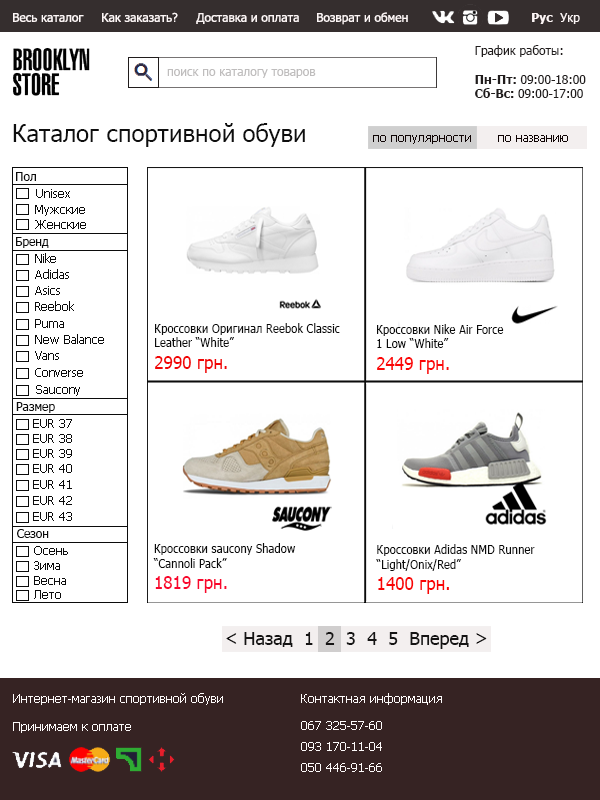
<style>
.page{position:relative;width:600px;height:800px;background:#ffffff}
.page>*{position:absolute;margin:0}
.t1{font:12px "Tahoma";color:#fdf6f6}
.t2{font:12px "Tahoma-Bold";color:#fdf6f6}
.t3{font:12px "Tahoma";color:#201c1c}
.t4{font:12px "Tahoma-Bold";color:#201c1c}
.t5{font:12px "Tahoma";color:#bfbdbd}
.t6{font:24px "Tahoma";color:#0e0e0e}
.t7{font:12px "Tahoma";color:#0e0303}
.t8{font:12px "Tahoma";color:#0b0b0b}
.t9{font:12px "Tahoma";color:#0b0b0b;scale:0.95 1}
.t10{font:18px "Tahoma";color:#f10505;scale:0.95 1}
.t11{font:18px "Tahoma";color:#fb0707;scale:0.95 1}
.t12{font:18px "Tahoma";color:#f9062e;scale:0.95 1}
.t13{font:18px "Tahoma";color:#f90505;scale:0.95 1}
.t14{font:18px "Tahoma";color:#151414}
.t15{font:18px "Tahoma";color:#f10505}
.t16{font:12px "Tahoma";color:#fefbfb}
</style>
<div class="page">
<p class="t1" style="left:13px;top:13px;width:71px;height:9px">Весь каталог</p>
<p class="t1" style="left:102px;top:12px;width:76px;height:10px">Как заказать?</p>
<p class="t1" style="left:196px;top:13px;width:103px;height:11px">Доставка и оплата</p>
<p class="t1" style="left:317px;top:12px;width:91px;height:13px">Возврат и обмен</p>
<p class="t2" style="left:532px;top:13px;width:21px;height:11px">Рус</p>
<p class="t1" style="left:560px;top:13px;width:20px;height:11px">Укр</p>
<p class="t3" style="left:475px;top:45px;width:111px;height:53px;text-align:right">График работы:<br><br><span class="t4">Пн-Пт:</span> 09:00-18:00<br><span class="t4">Сб-Вс: </span>09:00-17:00</p>
<p class="t5" style="left:167px;top:69px;width:149px;height:9px">поиск по каталогу товаров</p>
<p class="t6" style="left:13px;top:123px;width:292px;height:24px">Каталог спортивной обуви</p>
<p class="t7" style="left:373px;top:135px;width:98px;height:9px">по популярности</p>
<p class="t7" style="left:498px;top:135px;width:70px;height:7px">по названию</p>
<p class="t8" style="left:16px;top:172px;width:20px;height:9px">Пол</p>
<p class="t8" style="left:36px;top:189px;width:34px;height:9px">Unisex</p>
<p class="t8" style="left:35px;top:205px;width:50px;height:11px">Мужские</p>
<p class="t8" style="left:35px;top:220px;width:51px;height:9px">Женские</p>
<p class="t8" style="left:16px;top:237px;width:33px;height:11px">Бренд</p>
<p class="t8" style="left:35px;top:253px;width:21px;height:10px">Nike</p>
<p class="t8" style="left:35px;top:269px;width:34px;height:10px">Adidas</p>
<p class="t8" style="left:35px;top:286px;width:25px;height:9px">Asics</p>
<p class="t8" style="left:35px;top:301px;width:39px;height:10px">Reebok</p>
<p class="t8" style="left:35px;top:319px;width:29px;height:9px">Puma</p>
<p class="t9" style="left:155px;top:323px;width:185px;height:50px;text-align:right">Кроссовки Оригинал Reebok Classic Leather “White”<br><span class="t10">2990 грн.</span></p>
<p class="t9" style="left:377px;top:324px;width:127px;height:50px;text-align:right">Кроссовки Nike Air Force  <br>1 Low “White”<br><span class="t11">2449 грн.</span></p>
<p class="t8" style="left:35px;top:334px;width:69px;height:10px">New Balance</p>
<p class="t8" style="left:35px;top:351px;width:24px;height:9px">Vans</p>
<p class="t8" style="left:35px;top:368px;width:48px;height:9px">Converse</p>
<p class="t8" style="left:36px;top:385px;width:44px;height:11px">Saucony</p>
<p class="t8" style="left:16px;top:402px;width:39px;height:11px">Размер</p>
<p class="t8" style="left:33px;top:419px;width:39px;height:9px">EUR 37</p>
<p class="t8" style="left:33px;top:434px;width:39px;height:9px">EUR 38</p>
<p class="t8" style="left:33px;top:449px;width:39px;height:9px">EUR 39</p>
<p class="t8" style="left:33px;top:464px;width:39px;height:9px">EUR 40</p>
<p class="t8" style="left:33px;top:480px;width:39px;height:9px">EUR 41</p>
<p class="t8" style="left:33px;top:496px;width:39px;height:9px">EUR 42</p>
<p class="t8" style="left:33px;top:512px;width:39px;height:9px">EUR 43</p>
<p class="t8" style="left:17px;top:529px;width:32px;height:9px">Сезон</p>
<p class="t9" style="left:153px;top:543px;width:143px;height:50px;text-align:right">Кроссовки saucony Shadow <br>“Cannoli Pack”<br><span class="t12">1819 грн.</span></p>
<p class="t9" style="left:376px;top:544px;width:159px;height:50px;text-align:right">Кроссовки Adidas NMD Runner <br>“Light/Onix/Red”<br><span class="t13">1400 грн.</span></p>
<p class="t8" style="left:34px;top:546px;width:34px;height:9px">Осень</p>
<p class="t8" style="left:34px;top:561px;width:26px;height:9px">Зима</p>
<p class="t8" style="left:34px;top:576px;width:32px;height:9px">Весна</p>
<p class="t8" style="left:34px;top:590px;width:27px;height:9px">Лето</p>
<p class="t14" style="left:226px;top:632px;width:261px;height:17px"><span class="t15"> </span>&lt; Назад  1  2  3  4  5  Вперед &gt;</p>
<p class="t16" style="left:13px;top:693px;width:210px;height:12px">Интернет-магазин спортивной обуви</p>
<p class="t16" style="left:301px;top:693px;width:141px;height:12px">Контактная информация</p>
<p class="t16" style="left:13px;top:722px;width:118px;height:11px">Принимаем к оплате</p>
<p class="t16" style="left:301px;top:721px;width:81px;height:9px">067 325-57-60</p>
<p class="t16" style="left:301px;top:742px;width:81px;height:9px">093 170-11-04</p>
<p class="t16" style="left:301px;top:763px;width:81px;height:9px">050 446-91-66</p>
</div>
